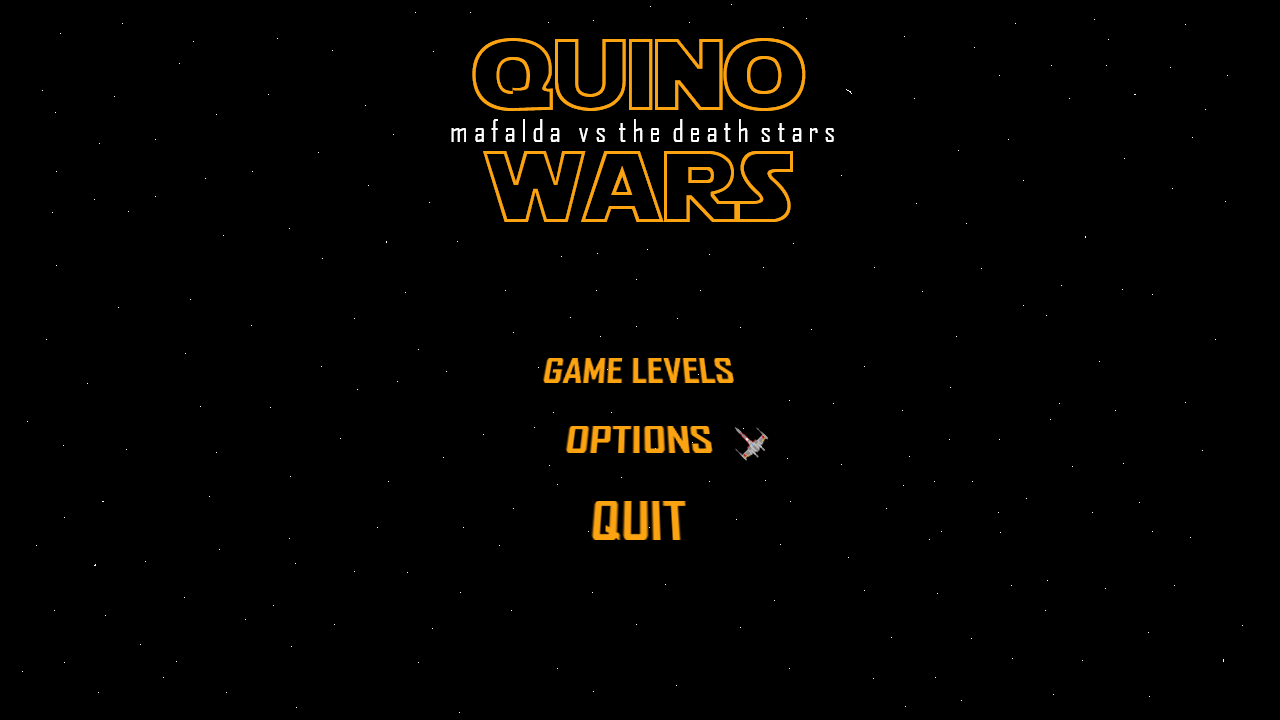
<style>
.page{position:relative;width:1280px;height:720px;background:#000000}
.page>*{position:absolute;margin:0}
.t1{font:101px "StarJediHollow";color:#fca311}
.t2{font:30px "AgencyFB-Reg";color:#ffffff}
</style>
<div class="page">
<p class="t1" style="left:472px;top:38px;width:334px;height:73px">quino</p>
<p class="t2" style="left:451px;top:119px;width:383px;height:23px">m a f a l d a   v s  t h e  d e a t h  s t a r s</p>
<p class="t1" style="left:483px;top:151px;width:310px;height:71px">wars</p>
</div>
